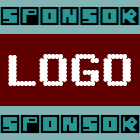
<style>
.page{position:relative;width:140px;height:140px;background:#5e0000}
.page>*{position:absolute;margin:0}
.t1{font:32px "Blocks";color:#000000}
.t2{font:48px "SixEightZeroNineChargen-Regular";color:#ffffff}
</style>
<div class="page">
<p class="t1" style="left:0px;top:6px;width:139px;height:20px">SPONSOR</p>
<p class="t2" style="left:8px;top:54px;width:123px;height:32px">LOGO</p>
<p class="t1" style="left:0px;top:114px;width:140px;height:20px">SPONSOR</p>
</div>
